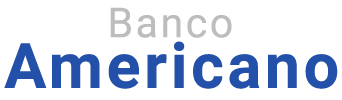
<style>
.page{position:relative;width:342px;height:100px;background:#ffffff}
.page>*{position:absolute;margin:0}
.t1{font:41.2px "Roboto-Regular";letter-spacing:0.06em;color:#bdbdbd}
.t2{font:62.6px "Roboto-Bold";letter-spacing:0.06em;color:#2350a9}
</style>
<div class="page">
<p class="t1" style="left:110px;top:7px;width:122px;height:31px">Banco</p>
<p class="t2" style="left:4px;top:41px;width:334px;height:48px">Americano</p>
</div>
